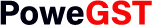
<style>
.page{position:relative;width:152px;height:25px;background:#ffffff}
.page>*{position:absolute;margin:0}
.t1{font:34px "AcuminConcept-Bold";color:#000011;font-weight:bold}
.t2{font:34px "AcuminConcept-Bold";color:#f50707;font-weight:bold}
</style>
<div class="page">
<p class="t1" style="left:0px;top:0px;width:152px;height:25px">Powe<span class="t2">GST</span></p>
</div>
